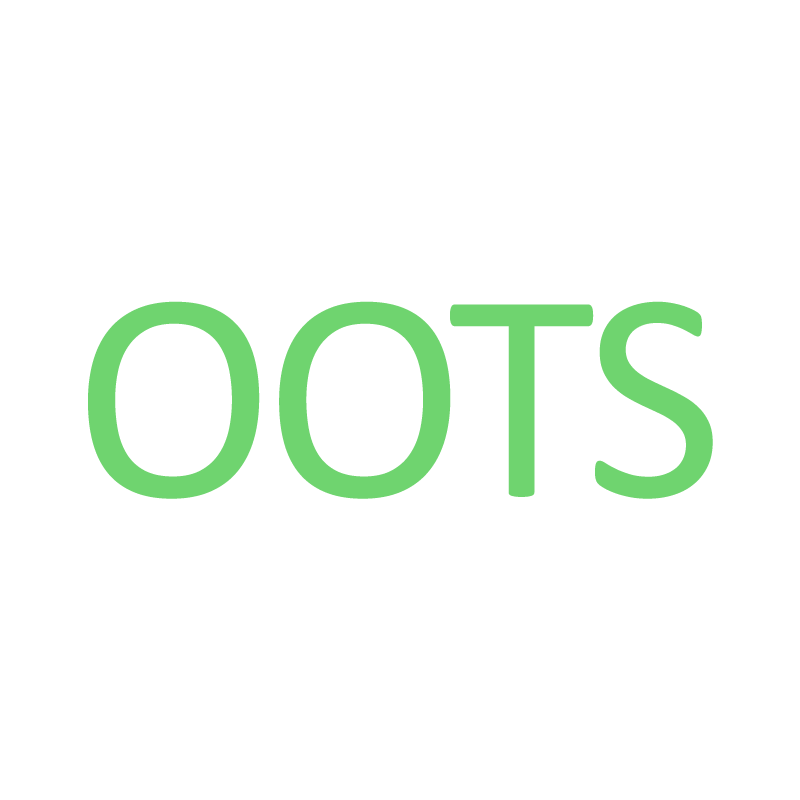
<style>
.page{position:relative;width:800px;height:800px;background:#ffffff}
.page>*{position:absolute;margin:0}
.t1{font:302.4px "Calibri";letter-spacing:-0.03em;color:#6fd46f}
</style>
<div class="page">
<p class="t1" style="left:88px;top:301px;width:625px;height:198px">OOTS</p>
</div>
